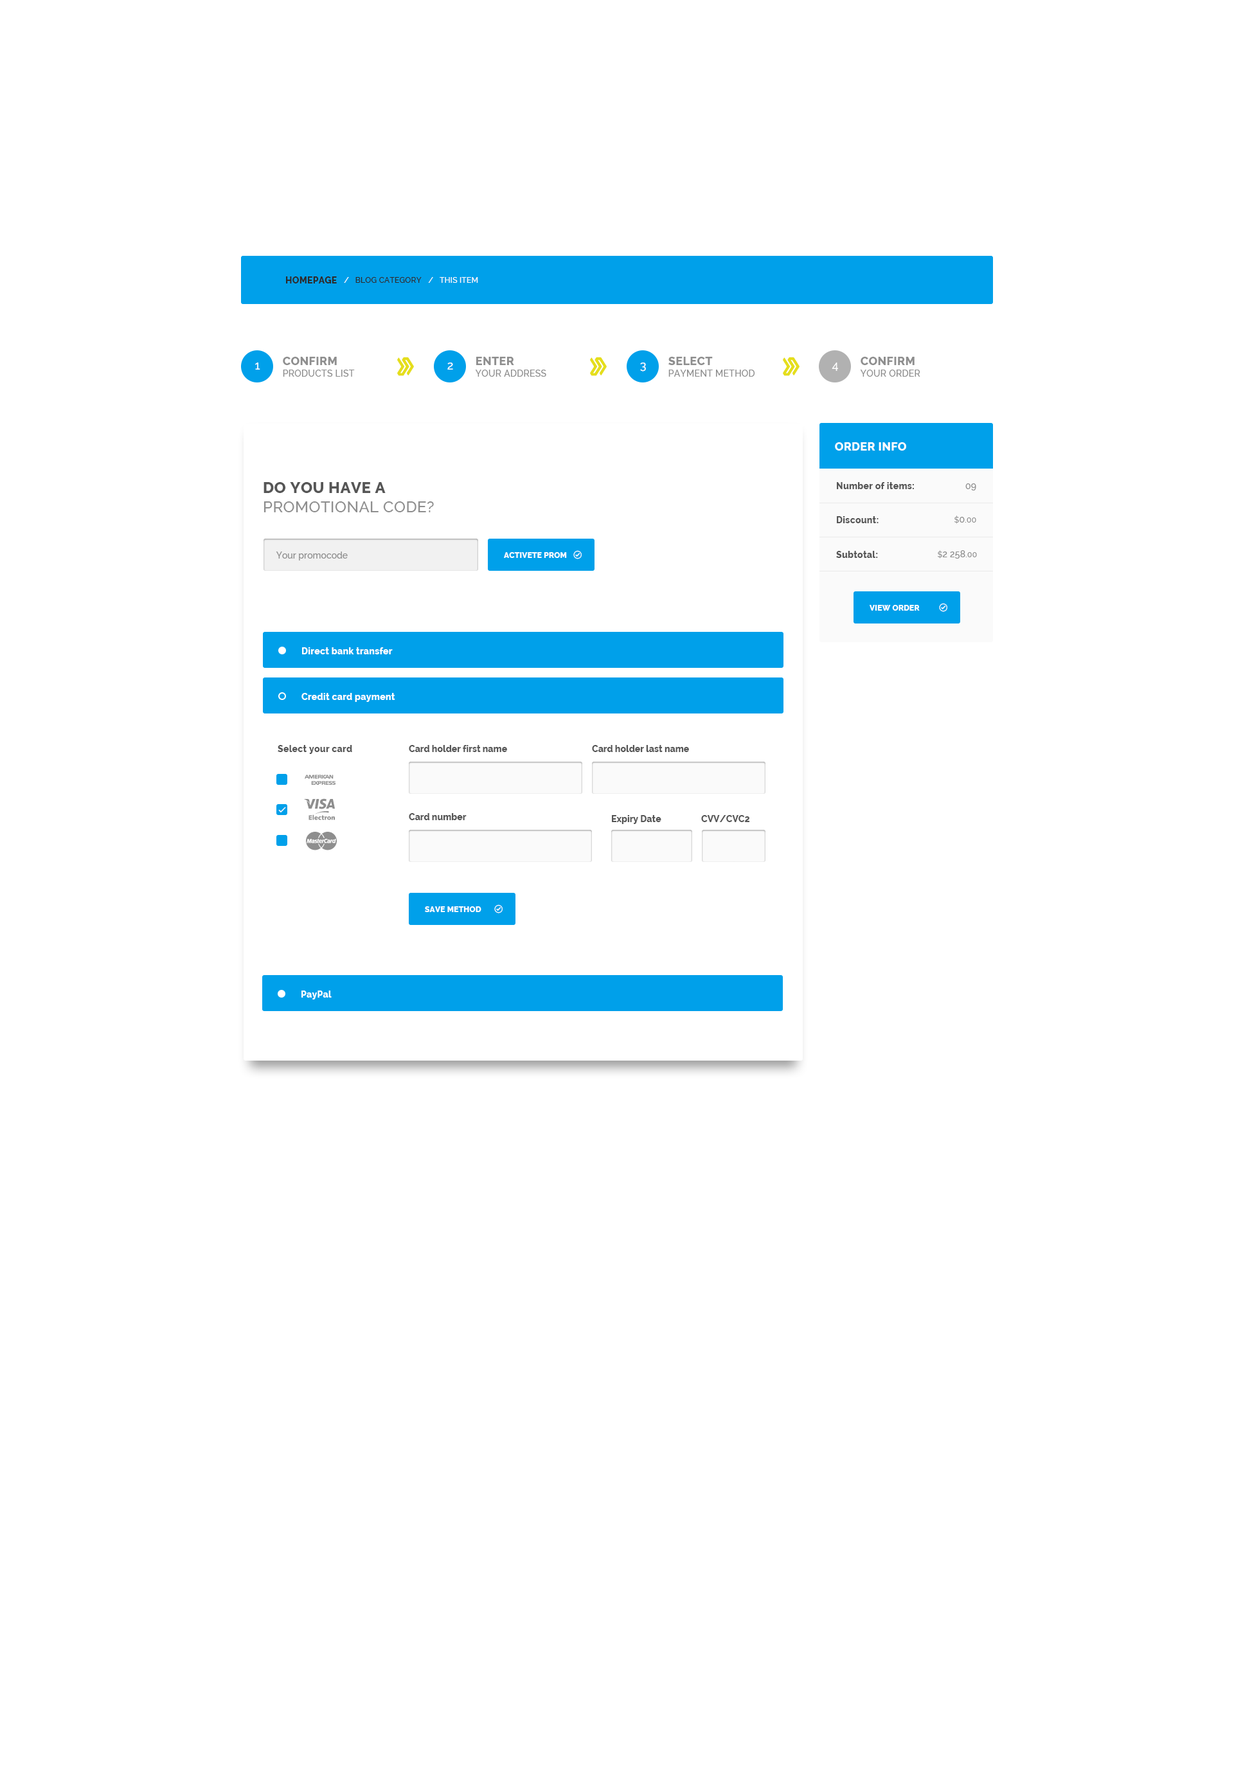
<style>
.page{position:relative;width:1234px;height:1776px;background:#ffffff}
.page>*{position:absolute;margin:0}
.t1{font:7.7px "Raleway-Medium";letter-spacing:0.02em;color:#2c2c2c;text-transform:uppercase}
.t2{font:9px "Raleway-ExtraBold";letter-spacing:0.02em;color:#2c2c2c;text-transform:uppercase}
.t3{font:7.7px "Raleway-Medium";letter-spacing:0.02em;color:#ffffff;text-transform:uppercase}
.t4{font:7.7px "Raleway-Medium";letter-spacing:0.02em;color:#fafafa;text-transform:uppercase}
.t5{font:11.6px "Raleway-Medium";letter-spacing:0.02em;color:#ffffff;text-transform:uppercase}
.t6{font:9px/11.6px "Raleway-Medium";letter-spacing:0.02em;color:#8e8e8e;text-transform:uppercase}
.t7{font:11.6px/11.6px "Raleway-ExtraBold";letter-spacing:0.02em;color:#8e8e8e;text-transform:uppercase}
.t8{font:11.6px "Raleway-ExtraBold";letter-spacing:0.02em;color:#ffffff;text-transform:uppercase}
.t9{font:15.4px/19.3px "Raleway-Medium";letter-spacing:0.02em;color:#8e8e8e;text-transform:uppercase}
.t10{font:15.4px/19.3px "Raleway-ExtraBold";letter-spacing:0.02em;color:#565656;text-transform:uppercase}
.t11{font:9px "Raleway-ExtraBold";letter-spacing:0.02em;color:#565656}
.t12{font:9px "Raleway-Medium";letter-spacing:0.02em;color:#8e8e8e}
.t13{font:7.7px "Raleway-Medium";letter-spacing:0.02em;color:#8e8e8e}
.t14{font:9px "Raleway-Medium";color:#8e8e8e}
.t15{font:7.7px "Raleway-ExtraBold";letter-spacing:0.02em;color:#ffffff;text-transform:uppercase}
.t16{font:9px "Raleway-ExtraBold";letter-spacing:0.02em;color:#ffffff}
.t17{font:9px "Raleway-ExtraBold";color:#565656}
</style>
<div class="page">
<p class="t1" style="left:286px;top:276px;width:192px;height:8px"><span class="t2">Homepage   </span><span class="t3">/  </span> blog Category   <span class="t4">/   this item</span></p>
<p class="t5" style="left:255px;top:363px;width:5px;height:7px">1</p>
<p class="t6" style="left:283px;top:357px;width:72px;height:20px"><span class="t7">Confirm <br></span>products list</p>
<p class="t5" style="left:447px;top:363px;width:6px;height:7px">2</p>
<p class="t6" style="left:475px;top:357px;width:71px;height:20px"><span class="t7">Enter <br></span>your address</p>
<p class="t5" style="left:640px;top:363px;width:6px;height:9px">3</p>
<p class="t6" style="left:669px;top:357px;width:86px;height:20px"><span class="t7">Select <br></span>Payment Method</p>
<p class="t5" style="left:832px;top:363px;width:6px;height:8px">4</p>
<p class="t6" style="left:860px;top:357px;width:61px;height:20px"><span class="t7">Confirm <br></span>your order</p>
<p class="t8" style="left:835px;top:442px;width:71px;height:9px">Order info</p>
<p class="t9" style="left:264px;top:482px;width:170px;height:30px"><span class="t10">Do you have a <br></span>promotional code?</p>
<p class="t11" style="left:837px;top:482px;width:77px;height:7px">Number of items:</p>
<p class="t12" style="left:966px;top:483px;width:11px;height:8px">09</p>
<p class="t11" style="left:837px;top:516px;width:42px;height:7px">Discount:</p>
<p class="t13" style="left:955px;top:516px;width:22px;height:8px">$<span class="t12">0</span>.00</p>
<p class="t14" style="left:276px;top:552px;width:72px;height:9px">Your promocode</p>
<p class="t15" style="left:504px;top:552px;width:63px;height:6px">Activete Prom</p>
<p class="t11" style="left:836px;top:551px;width:42px;height:7px">Subtotal:</p>
<p class="t12" style="left:938px;top:550px;width:39px;height:9px"><span class="t13">$</span>2 258<span class="t13">.00</span></p>
<p class="t15" style="left:870px;top:605px;width:50px;height:6px">view order</p>
<p class="t16" style="left:302px;top:647px;width:91px;height:7px">Direct bank transfer</p>
<p class="t16" style="left:302px;top:693px;width:93px;height:9px">Credit card payment</p>
<p class="t11" style="left:278px;top:745px;width:74px;height:9px">Select your card</p>
<p class="t17" style="left:409px;top:745px;width:98px;height:7px">Card holder first name</p>
<p class="t17" style="left:592px;top:745px;width:97px;height:7px">Card holder last name</p>
<p class="t17" style="left:409px;top:813px;width:58px;height:7px">Card number</p>
<p class="t17" style="left:612px;top:815px;width:50px;height:9px">Expiry Date</p>
<p class="t17" style="left:701px;top:815px;width:49px;height:7px">CVV/CVC2</p>
<p class="t15" style="left:425px;top:906px;width:57px;height:6px">Save Method</p>
<p class="t16" style="left:302px;top:991px;width:30px;height:9px">PayPal</p>
</div>
